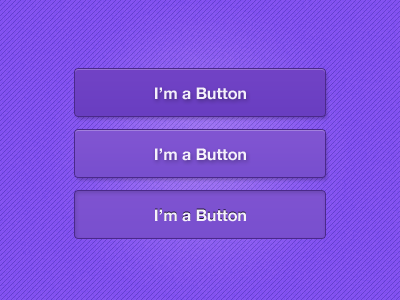
<style>
.page{position:relative;width:400px;height:300px}
.page>*{position:absolute;margin:0}
.t1{font:16px "HelveticaNeue-Bold";color:#ffffff}
</style>
<div class="page">
<p class="t1" style="left:155px;top:87px;width:91px;height:13px;opacity:0.92">I’m a Button</p>
<p class="t1" style="left:155px;top:148px;width:91px;height:13px;opacity:0.92">I’m a Button</p>
<p class="t1" style="left:155px;top:209px;width:91px;height:13px;opacity:0.92">I’m a Button</p>
</div>
